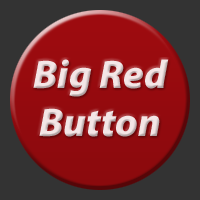
<style>
.page{position:relative;width:200px;height:200px;background:#333333}
.page>*{position:absolute;margin:0}
.t1{font:40px "MyriadPro-BlackIt";color:#f2e5e6}
</style>
<div class="page">
<p class="t1" style="left:33px;top:59px;width:136px;height:78px;text-align:center">Big Red<br>Button</p>
</div>
